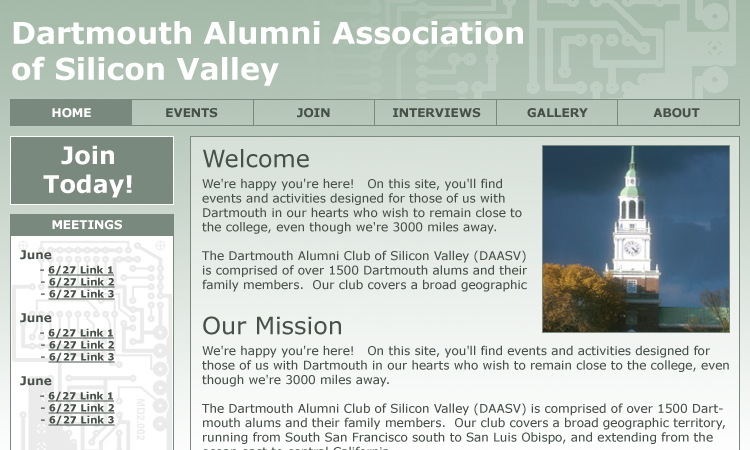
<style>
.page{position:relative;width:750px;height:450px}
.page>*{position:absolute;margin:0}
.t1{font:30px "Verdana-Bold";color:#ffffff}
.t2{font:12px "Verdana-Bold";color:#ffffff}
.t3{font:12px "Verdana-Bold";color:#475149}
.t4{font:24px "Verdana-Bold";color:#ffffff}
.t5{font:24px "Verdana";color:#475149}
.t6{font:12px "Verdana";color:#475149}
.t7{font:10px "Verdana-Bold";color:#475149;text-decoration:underline}
.t8{font:10px "Verdana-Bold";color:#475149}
</style>
<div class="page">
<p class="t1" style="left:12px;top:21px;width:511px;height:65px">Dartmouth Alumni Association<br>of Silicon Valley</p>
<p class="t2" style="left:52px;top:108px;width:39px;height:10px">HOME</p>
<p class="t3" style="left:166px;top:108px;width:52px;height:10px">EVENTS</p>
<p class="t3" style="left:297px;top:108px;width:33px;height:10px">JOIN</p>
<p class="t3" style="left:393px;top:108px;width:88px;height:10px">INTERVIEWS</p>
<p class="t3" style="left:527px;top:108px;width:61px;height:10px">GALLERY</p>
<p class="t3" style="left:653px;top:108px;width:47px;height:10px">ABOUT</p>
<p class="t4" style="left:43px;top:145px;width:89px;height:53px;text-align:center">Join<br>Today!</p>
<p class="t5" style="left:203px;top:149px;width:106px;height:19px">Welcome</p>
<p class="t6" style="left:202px;top:178px;width:325px;height:114px">We're happy you're here!   On this site, you'll find events and activities designed for those of us with Dartmouth in our hearts who wish to remain close to the college, even though we're 3000 miles away.<br><br>The Dartmouth Alumni Club of Silicon Valley (DAASV) is comprised of over 1500 Dartmouth alums and their family members.  Our club covers a broad geographic territory, running from South San Francisco south to San Luis Obispo, and extending from the ocean east to central California.</p>
<p class="t2" style="left:52px;top:220px;width:70px;height:10px">MEETINGS</p>
<p class="t7" style="left:20px;top:250px;width:95px;height:50px"><span class="t3">June<br>    </span><span class="t8"> - </span>6/27 Link 1<br><span class="t8">      - </span>6/27 Link 2<br><span class="t8">      - </span>6/27 Link 3</p>
<p class="t7" style="left:20px;top:313px;width:95px;height:50px"><span class="t3">June<br>     </span><span class="t8">- </span>6/27 Link 1<br><span class="t8">      - </span>6/27 Link 2<br><span class="t8">      - </span>6/27 Link 3</p>
<p class="t5" style="left:203px;top:316px;width:138px;height:19px">Our Mission</p>
<p class="t7" style="left:20px;top:376px;width:95px;height:50px"><span class="t3">June<br>    </span><span class="t8"> - </span>6/27 Link 1<br><span class="t8">      - </span>6/27 Link 2<br><span class="t8">      - </span>6/27 Link 3</p>
</div>
